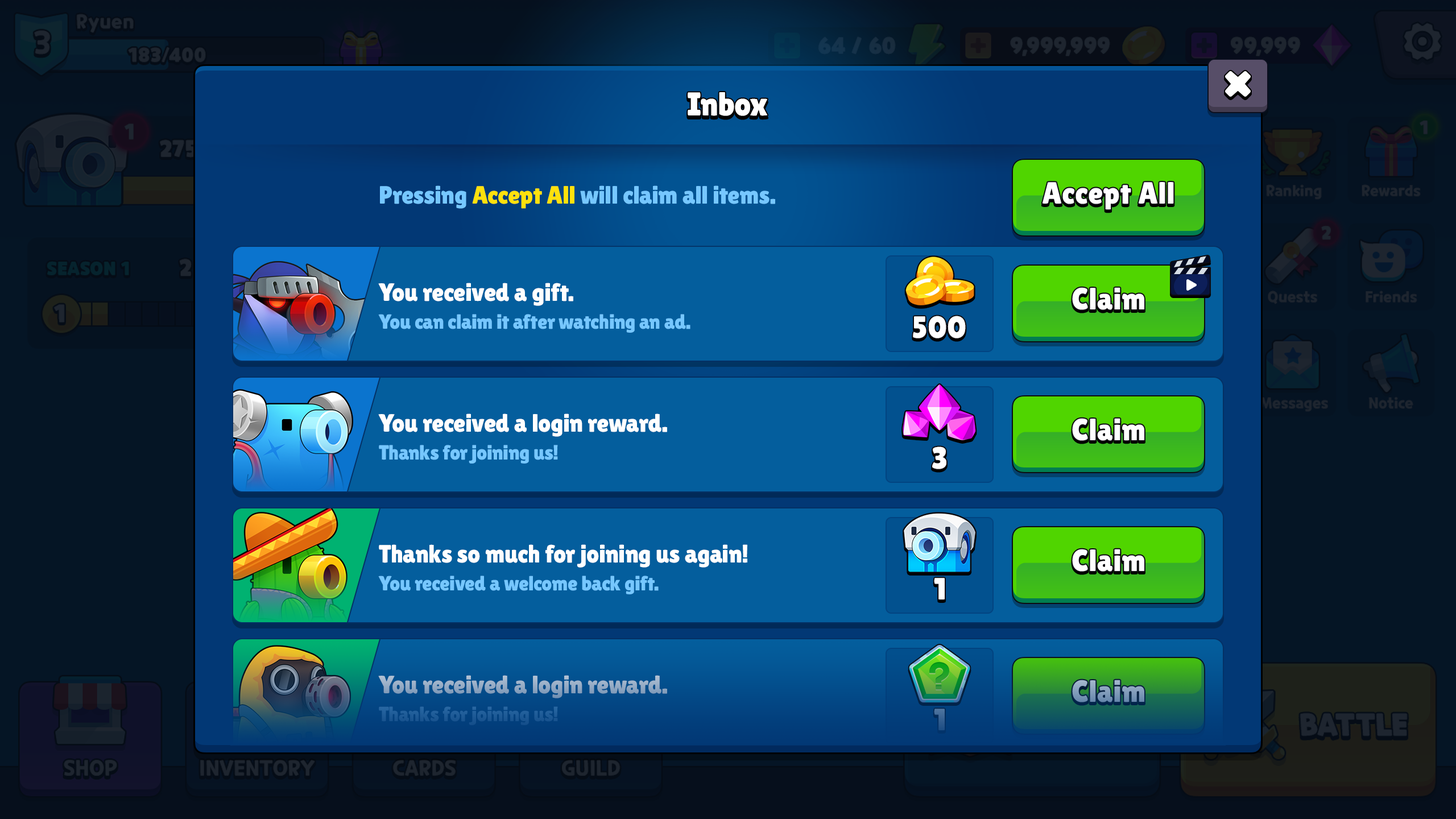
<style>
.page{position:relative;width:1456px;height:819px}
.page>*{position:absolute;margin:0}
.t1{font:33px "LilitaOne";color:#ffffff}
.t2{font:25px "LilitaOne";color:#76c7ff}
.t3{font:25px "LilitaOne";color:#ffe00d}
.t4{font:30.7px "LilitaOne";letter-spacing:0.02em;color:#ffffff}
.t5{font:25px "LilitaOne";color:#ffffff}
.t6{font:20.5px "LilitaOne";color:#76c7ff}
.t7{font:30.7px "LilitaOne";letter-spacing:0.02em;color:#ffffff;text-transform:uppercase}
.t8{font:25px "LilitaOne";color:#93aac4}
.t9{font:30.7px "LilitaOne";letter-spacing:0.02em;color:#7f9ab9}
.t10{font:20.5px "LilitaOne";color:#1e5a96}
.t11{font:30.7px "LilitaOne";letter-spacing:0.02em;color:#3a6493;text-transform:uppercase}
</style>
<div class="page">
<p class="t1" style="left:688px;top:92px;width:80px;height:24px">Inbox</p>
<p class="t2" style="left:380px;top:185px;width:395px;height:24px">Pressing <span class="t3">Accept All</span> will claim all items.</p>
<p class="t4" style="left:1042px;top:182px;width:132px;height:28px">Accept All</p>
<p class="t5" style="left:378px;top:283px;width:195px;height:23px">You received a gift.</p>
<p class="t4" style="left:1072px;top:287px;width:72px;height:23px">Claim</p>
<p class="t6" style="left:378px;top:314px;width:312px;height:19px">You can claim it after watching an ad.</p>
<p class="t7" style="left:913px;top:316px;width:53px;height:22px">500</p>
<p class="t5" style="left:378px;top:413px;width:289px;height:24px">You received a login reward.</p>
<p class="t4" style="left:1072px;top:418px;width:72px;height:23px">Claim</p>
<p class="t6" style="left:379px;top:445px;width:179px;height:19px">Thanks for joining us!</p>
<p class="t7" style="left:932px;top:446px;width:14px;height:23px">3</p>
<p class="t5" style="left:379px;top:544px;width:368px;height:24px">Thanks so much for joining us again!</p>
<p class="t4" style="left:1072px;top:549px;width:72px;height:23px">Claim</p>
<p class="t6" style="left:378px;top:576px;width:281px;height:18px">You received a welcome back gift.</p>
<p class="t7" style="left:934px;top:578px;width:11px;height:21px">1</p>
<p class="t8" style="left:378px;top:675px;width:289px;height:23px">You received a login reward.</p>
<p class="t9" style="left:1072px;top:680px;width:72px;height:22px">Claim</p>
<p class="t10" style="left:379px;top:706px;width:179px;height:19px">Thanks for joining us!</p>
<p class="t11" style="left:934px;top:709px;width:11px;height:21px">1</p>
</div>
